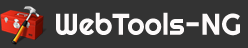
<style>
.page{position:relative;width:248px;height:48px;background:#333333}
.page>*{position:absolute;margin:0}
.t1{font:30px "Righteous-Regular";color:#fdfafa}
</style>
<div class="page">
<p class="t1" style="left:56px;top:12px;width:184px;height:24px">WebTools-NG</p>
</div>
